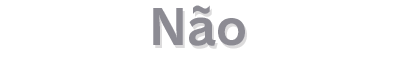
<style>
.page{position:relative;width:400px;height:60px;background:#ffffff}
.page>*{position:absolute;margin:0}
.t1{font:48px "RodinPro-B";color:#8c8b93}
</style>
<div class="page">
<p class="t1" style="left:153px;top:5px;width:92px;height:41px">Não</p>
</div>
